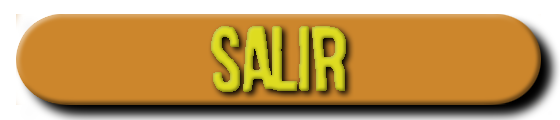
<style>
.page{position:relative;width:560px;height:120px;background:#cc862c}
.page>*{position:absolute;margin:0}
.t1{font:89px "camellodespit";color:#dedc20}
</style>
<div class="page">
<p class="t1" style="left:211px;top:26px;width:135px;height:66px">Salir</p>
</div>
